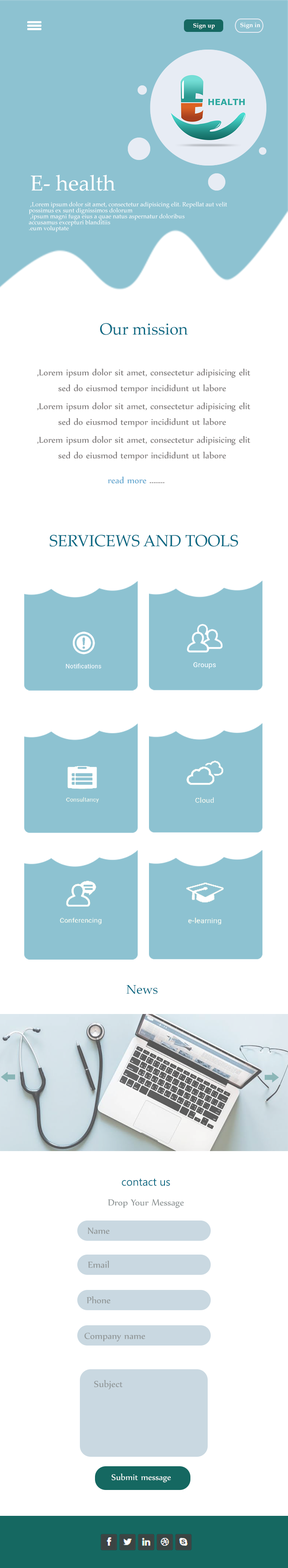
<style>
.page{position:relative;width:288px;height:1568px;background:#ffffff}
.page>*{position:absolute;margin:0}
.t1{font:6px "PalatinoLinotype-Bold";color:#ffffff}
.t2{font:21.6px "PalatinoLinotype-Roman";color:#ffffff}
.t3{font:6px/6px "PalatinoLinotype-Roman";color:#ffffff}
.t4{font:16.1px "PalatinoLinotype-Roman";color:#0c6a84}
.t5{font:10.3px/5.2px "Nyala-Regular";color:#7d7979}
.t6{font:10.3px "Nyala-Regular";color:#62a6cf}
.t7{font:10.3px "Nyala-Regular";color:#7d7979}
.t8{font:12.4px "PalatinoLinotype-Roman";color:#0c6a84}
.t9{font:10.8px "MicrosoftNewTaiLue";color:#0c6a84}
.t10{font:10.6px "Nyala-Regular";color:#909697}
.t11{font:9.9px "Nyala-Regular";color:#fefefe}
</style>
<div class="page">
<p class="t1" style="left:193px;top:23px;width:22px;height:6px">Sign up</p>
<p class="t1" style="left:240px;top:22px;width:20px;height:7px">Sign in</p>
<p class="t2" style="left:31px;top:175px;width:84px;height:16px">E- health</p>
<p class="t3" style="left:28px;top:202px;width:199px;height:30px;text-align:right">Lorem ipsum dolor sit amet, consectetur adipisicing elit. Repellat aut velit, <br>possimus ex sunt dignissimos dolorum<br> ipsum magni fuga eius a quae natus aspernatur doloribus, <br>accusamus excepturi blanditiis<br> eum voluptate.</p>
<p class="t4" style="left:100px;top:323px;width:88px;height:12px">Our mission</p>
<p class="t5" style="left:37px;top:369px;width:213px;height:25px;text-align:center">Lorem ipsum dolor sit amet, consectetur adipisicing elit,<br><br><br> sed do eiusmod tempor incididunt ut labore</p>
<p class="t5" style="left:37px;top:402px;width:213px;height:25px;text-align:center">Lorem ipsum dolor sit amet, consectetur adipisicing elit,<br><br><br> sed do eiusmod tempor incididunt ut labore</p>
<p class="t5" style="left:37px;top:436px;width:213px;height:25px;text-align:center">Lorem ipsum dolor sit amet, consectetur adipisicing elit,<br><br><br> sed do eiusmod tempor incididunt ut labore</p>
<p class="t6" style="left:108px;top:476px;width:38px;height:8px">read more</p>
<p class="t7" style="left:150px;top:482px;width:14px;height:1px">........</p>
<p class="t4" style="left:50px;top:535px;width:188px;height:12px">SERVICEWS AND TOOLS</p>
<p class="t8" style="left:126px;top:985px;width:31px;height:9px">News</p>
<p class="t9" style="left:122px;top:1178px;width:48px;height:8px">contact us</p>
<p class="t10" style="left:108px;top:1199px;width:76px;height:9px">Drop Your Message</p>
<p class="t10" style="left:88px;top:1227px;width:22px;height:7px">Name</p>
<p class="t10" style="left:88px;top:1261px;width:21px;height:7px">Email</p>
<p class="t10" style="left:87px;top:1296px;width:23px;height:8px">Phone</p>
<p class="t10" style="left:84px;top:1333px;width:61px;height:9px">Company name</p>
<p class="t10" style="left:94px;top:1380px;width:28px;height:10px">Subject</p>
<p class="t11" style="left:111px;top:1474px;width:60px;height:9px">Submit message</p>
</div>
